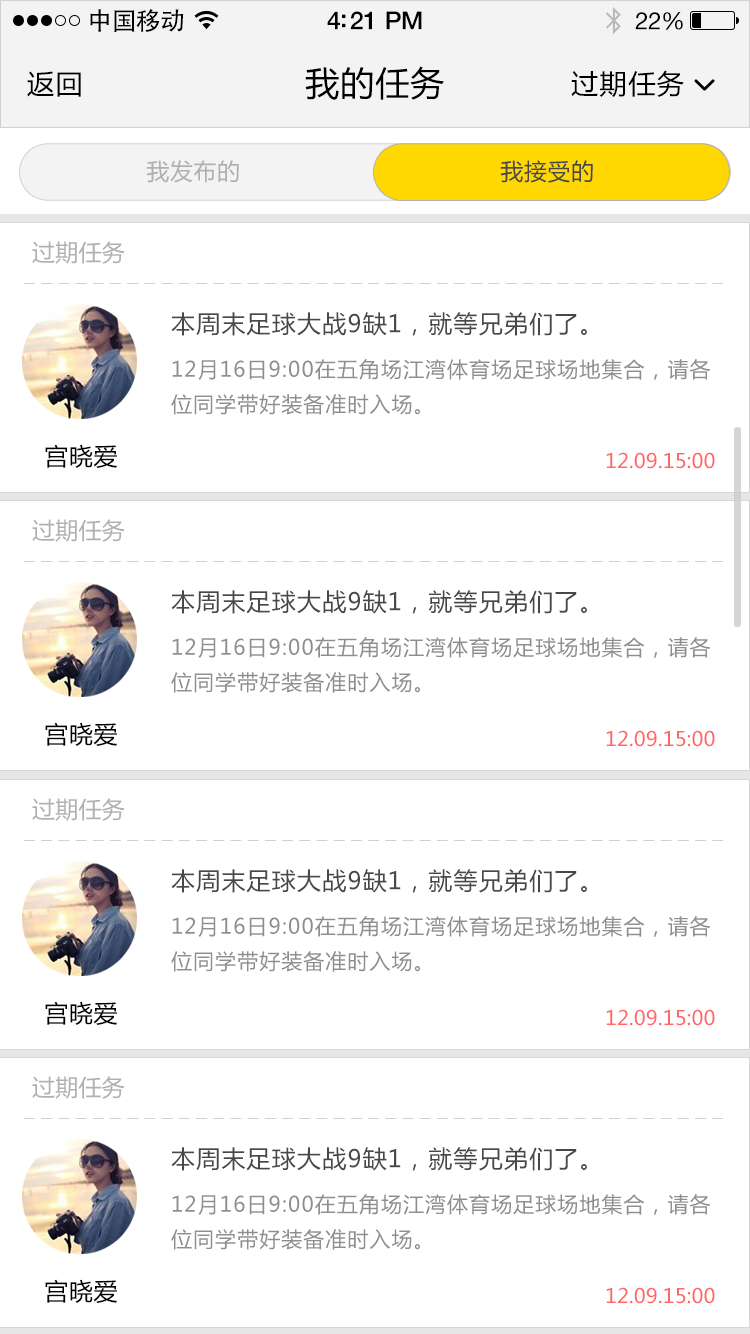
<style>
.page{position:relative;width:750px;height:1334px;background:#ffffff}
.page>*{position:absolute;margin:0}
.t1{font:25px "AdobeHeitiStd-Regular";letter-spacing:-0.025em;color:#000000}
.t2{font:25px "HelveticaNeue-Medium";letter-spacing:-0.02em;color:#000000}
.t3{font:24px "HelveticaNeue";letter-spacing:-0.02em;color:#000000}
.t4{font:27px "MicrosoftYaHei";letter-spacing:0.05em;color:#000000}
.t5{font:34px "MicrosoftYaHei";letter-spacing:0.03em;color:#000000}
.t6{font:23px "MicrosoftYaHei";letter-spacing:0.03em;color:#b0b0b0}
.t7{font:23px "MicrosoftYaHei";letter-spacing:0.03em;color:#484848}
.t8{font:23px "MicrosoftYaHei";letter-spacing:0.01em;color:#b0b0b0}
.t9{font:24px "MicrosoftYaHei";letter-spacing:0.05em;color:#555555}
.t10{font:21px/35px "MicrosoftYaHei";letter-spacing:0.05em;color:#8e8e8e}
.t11{font:24px "MicrosoftYaHei";letter-spacing:0.03em;color:#000000}
.t12{font:20px "MicrosoftYaHei";letter-spacing:0.01em;color:#ff6666}
</style>
<div class="page">
<p class="t1" style="left:90px;top:9px;width:94px;height:23px">中国移动</p>
<p class="t2" style="left:327px;top:11px;width:95px;height:19px">4:21 PM</p>
<p class="t3" style="left:635px;top:12px;width:48px;height:18px">22%</p>
<p class="t4" style="left:27px;top:71px;width:54px;height:26px">返回</p>
<p class="t5" style="left:305px;top:66px;width:139px;height:34px">我的任务</p>
<p class="t4" style="left:571px;top:70px;width:113px;height:27px">过期任务</p>
<p class="t6" style="left:146px;top:160px;width:93px;height:23px">我发布的</p>
<p class="t7" style="left:500px;top:160px;width:93px;height:23px">我接受的</p>
<p class="t8" style="left:32px;top:241px;width:93px;height:23px">过期任务</p>
<p class="t9" style="left:171px;top:312px;width:416px;height:24px">本周末足球大战9缺1，就等兄弟们了。</p>
<p class="t10" style="left:171px;top:359px;width:540px;height:56px">12月16日9:00在五角场江湾体育场足球场地集合，请各<br>位同学带好装备准时入场。</p>
<p class="t11" style="left:45px;top:444px;width:73px;height:24px">宫晓爱</p>
<p class="t12" style="left:606px;top:452px;width:109px;height:17px">12.09.15:00</p>
<p class="t8" style="left:32px;top:519px;width:93px;height:23px">过期任务</p>
<p class="t9" style="left:171px;top:590px;width:416px;height:24px">本周末足球大战9缺1，就等兄弟们了。</p>
<p class="t10" style="left:171px;top:637px;width:540px;height:56px">12月16日9:00在五角场江湾体育场足球场地集合，请各<br>位同学带好装备准时入场。</p>
<p class="t11" style="left:45px;top:722px;width:73px;height:24px">宫晓爱</p>
<p class="t12" style="left:606px;top:730px;width:109px;height:17px">12.09.15:00</p>
<p class="t8" style="left:32px;top:798px;width:93px;height:23px">过期任务</p>
<p class="t9" style="left:171px;top:869px;width:416px;height:24px">本周末足球大战9缺1，就等兄弟们了。</p>
<p class="t10" style="left:171px;top:916px;width:540px;height:56px">12月16日9:00在五角场江湾体育场足球场地集合，请各<br>位同学带好装备准时入场。</p>
<p class="t11" style="left:45px;top:1001px;width:73px;height:24px">宫晓爱</p>
<p class="t12" style="left:606px;top:1009px;width:109px;height:17px">12.09.15:00</p>
<p class="t8" style="left:32px;top:1076px;width:93px;height:23px">过期任务</p>
<p class="t9" style="left:171px;top:1147px;width:416px;height:24px">本周末足球大战9缺1，就等兄弟们了。</p>
<p class="t10" style="left:171px;top:1194px;width:540px;height:56px">12月16日9:00在五角场江湾体育场足球场地集合，请各<br>位同学带好装备准时入场。</p>
<p class="t11" style="left:45px;top:1279px;width:73px;height:24px">宫晓爱</p>
<p class="t12" style="left:606px;top:1287px;width:109px;height:17px">12.09.15:00</p>
</div>
